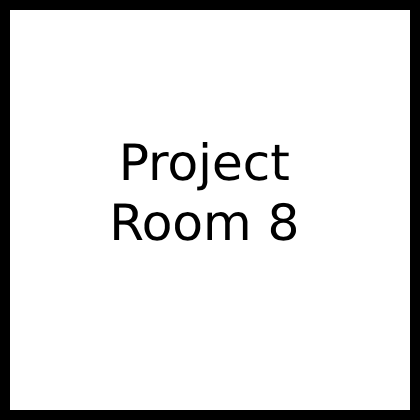
<style>
.page{position:relative;width:420px;height:420px;background:#ffffff}
.page>*{position:absolute;margin:0}
.t1{font:50px "DejaVuSans";color:#000000}
</style>
<div class="page">
<p class="t1" style="left:114px;top:142px;width:182px;height:99px;text-align:center">Project<br>Room 8</p>
</div>
